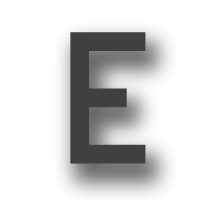
<style>
.page{position:relative;width:215px;height:200px;background:#ffffff}
.page>*{position:absolute;margin:0}
.t1{font:150px "Manteka";color:#3f4040}
</style>
<div class="page">
<p class="t1" style="left:70px;top:32px;width:76px;height:132px">E</p>
</div>
